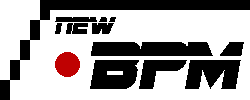
<style>
.page{position:relative;width:250px;height:100px;background:#ffffff}
.page>*{position:absolute;margin:0}
.t1{font:26px "SFSportsNightAlternate";color:#000000}
.t2{font:70px "SFSportsNightAlternate";color:#000000}
</style>
<div class="page">
<p class="t1" style="left:55px;top:17px;width:61px;height:17px">NEW</p>
<p class="t2" style="left:90px;top:42px;width:154px;height:47px">BPM</p>
</div>
